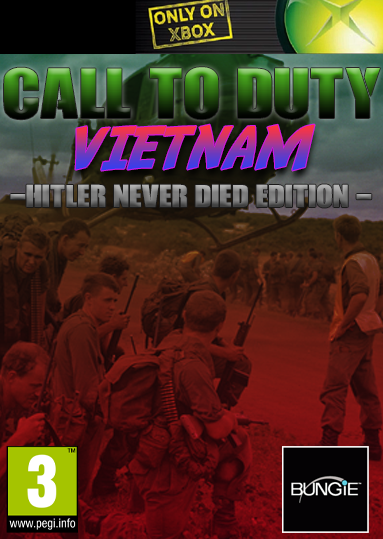
<style>
.page{position:relative;width:383px;height:539px}
.page>*{position:absolute;margin:0}
.t1{font:66.8px "CallOfOpsDuty"}
.t2{font:58px "Adventure"}
.t3{font:29.7px "CallOfOpsDuty"}
</style>
<div class="page">
<p class="t1" style="left:4px;top:67px;width:376px;height:53px">call to duty</p>
<p class="t2" style="left:75px;top:124px;width:240px;height:47px">VIETNAM</p>
<p class="t3" style="left:10px;top:184px;width:362px;height:24px">-Hitler never died edition -</p>
</div>
